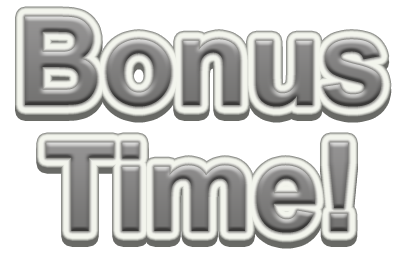
<style>
.page{position:relative;width:400px;height:260px;background:#ffffff}
.page>*{position:absolute;margin:0}
.t1{font:123.2px "Arial-BoldMT";scale:0.97 1}
</style>
<div class="page">
<p class="t1" style="left:25px;top:16px;width:357px;height:91px">Bonus</p>
<p class="t1" style="left:25px;top:22px;width:357px;height:91px">Bonus</p>
<p class="t1" style="left:46px;top:148px;width:302px;height:91px">Time!</p>
<p class="t1" style="left:46px;top:142px;width:302px;height:91px">Time!</p>
</div>
